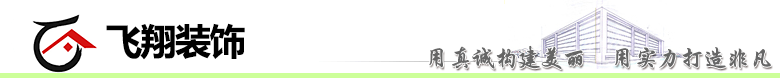
<style>
.page{position:relative;width:780px;height:80px;background:#ffffff}
.page>*{position:absolute;margin:0}
.t1{font:36px "MicrosoftYaHei-Bold";letter-spacing:-0.04em;color:#000000}
.t2{font:24px "STXingkai";letter-spacing:-0.04em;color:#666666}
</style>
<div class="page">
<p class="t1" style="left:106px;top:23px;width:139px;height:37px">飞翔装饰</p>
<p class="t2" style="left:429px;top:45px;width:342px;height:24px">用真诚构建美丽     用实力打造非凡</p>
</div>
